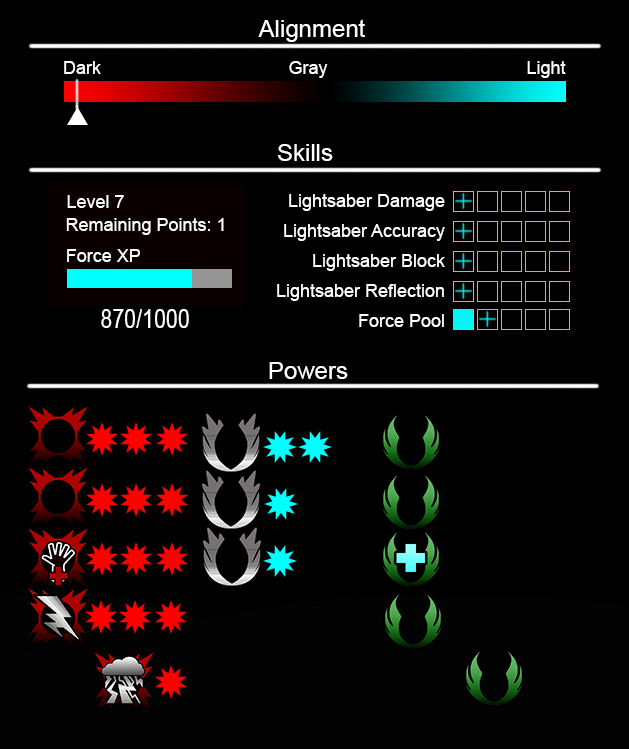
<style>
.page{position:relative;width:629px;height:749px;background:#000000}
.page>*{position:absolute;margin:0}
.t1{font:24px "ArialMT";color:#ffffff}
.t2{font:18px "ArialMT";color:#ffffff}
.t3{font:18px/30px "ArialMT";color:#ffffff}
.t4{font:26.4px "ArialMT";color:#ffffff;scale:0.81 1}
</style>
<div class="page">
<p class="t1" style="left:258px;top:19px;width:107px;height:23px">Alignment</p>
<p class="t2" style="left:64px;top:61px;width:37px;height:13px">Dark</p>
<p class="t2" style="left:289px;top:61px;width:39px;height:17px">Gray</p>
<p class="t2" style="left:527px;top:61px;width:39px;height:17px">Light</p>
<p class="t1" style="left:278px;top:144px;width:55px;height:17px">Skills</p>
<p class="t3" style="left:277px;top:194px;width:168px;height:133px;text-align:right">Lightsaber Damage<br>Lightsaber Accuracy<br>Lightsaber Block<br>Lightsaber Reflection<br>Force Pool</p>
<p class="t4" style="left:101px;top:309px;width:88px;height:19px">870/1000</p>
<p class="t1" style="left:269px;top:362px;width:79px;height:17px">Powers</p>
</div>
